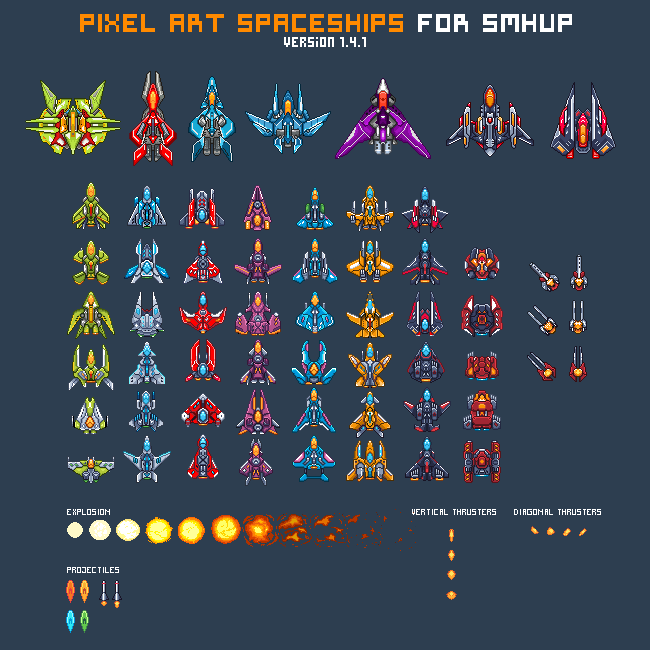
<style>
.page{position:relative;width:650px;height:650px;background:#2d3e50}
.page>*{position:absolute;margin:0}
.t1{font:24px "Symtext";color:#ff8a00}
.t2{font:24px "Symtext";color:#ffffff}
.t3{font:14px "Pixel";color:#ffffff}
.t4{font:9px "Pixel";color:#ffffff}
</style>
<div class="page">
<p class="t1" style="left:80px;top:14px;width:492px;height:18px">PIXEL ART SPACESHIPS <span class="t2">FOR SMHUP</span></p>
<p class="t3" style="left:284px;top:37px;width:82px;height:10px">version 1.4.1</p>
<p class="t4" style="left:67px;top:509px;width:43px;height:6px">EXPLOSION</p>
<p class="t4" style="left:412px;top:509px;width:84px;height:6px">VERTICAL THRUSTERS</p>
<p class="t4" style="left:514px;top:509px;width:87px;height:6px">DIAGONAL THRUSTERS</p>
<p class="t4" style="left:67px;top:567px;width:52px;height:6px">PROJECTILES</p>
</div>
